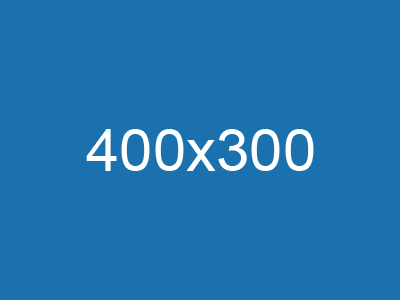
<style>
.page{position:relative;width:400px;height:300px;background:#1a71ae}
.page>*{position:absolute;margin:0}
.t1{font:60px "ArialMT";color:#ffffff}
</style>
<div class="page">
<p class="t1" style="left:86px;top:129px;width:228px;height:42px">400x300</p>
</div>
